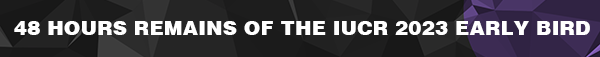
<style>
.page{position:relative;width:600px;height:57px}
.page>*{position:absolute;margin:0}
.t1{font:20px "Helvetica-Black";color:#ffffff;text-transform:uppercase}
</style>
<div class="page">
<p class="t1" style="left:14px;top:21px;width:576px;height:14px">48 Hours Remains of the IUCr 2023 Early Bird</p>
</div>
